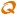
<style>
.page{position:relative;width:17px;height:17px;background:#ffffff}
.page>*{position:absolute;margin:0}
.t1{font:14px "MaturaMTScriptCapitals";color:#e27100}
</style>
<div class="page">
<p class="t1" style="left:1px;top:1px;width:15px;height:13px">Q</p>
</div>
